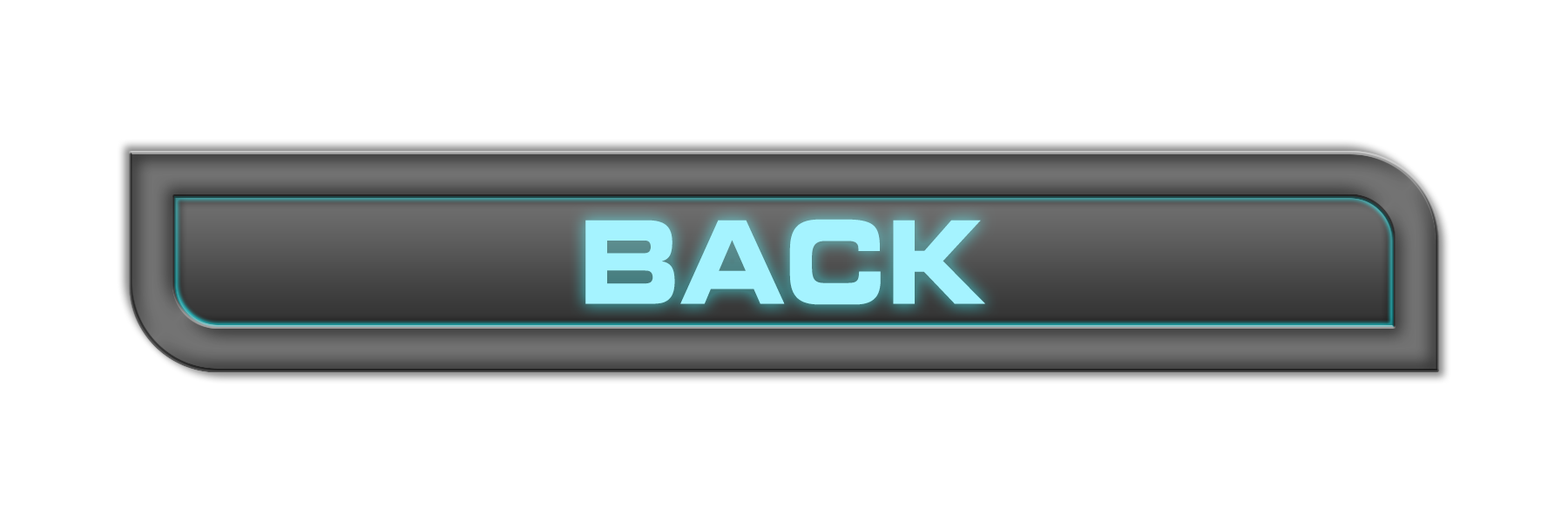
<style>
.page{position:relative;width:1568px;height:523px;background:#ffffff}
.page>*{position:absolute;margin:0}
.t1{font:115px "EurostileLTStd-BoldEx2";color:#a5f3ff;scale:0.83 1}
</style>
<div class="page">
<p class="t1" style="left:585px;top:219px;width:400px;height:86px">BACK</p>
</div>
